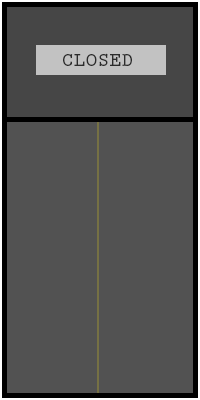
<style>
.page{position:relative;width:200px;height:400px;background:#525252}
.page>*{position:absolute;margin:0}
.t1{font:20px "PrestigeEliteStd-Bd";color:#2c2c2c}
</style>
<div class="page">
<p class="t1" style="left:63px;top:53px;width:69px;height:13px">CLOSED</p>
</div>
